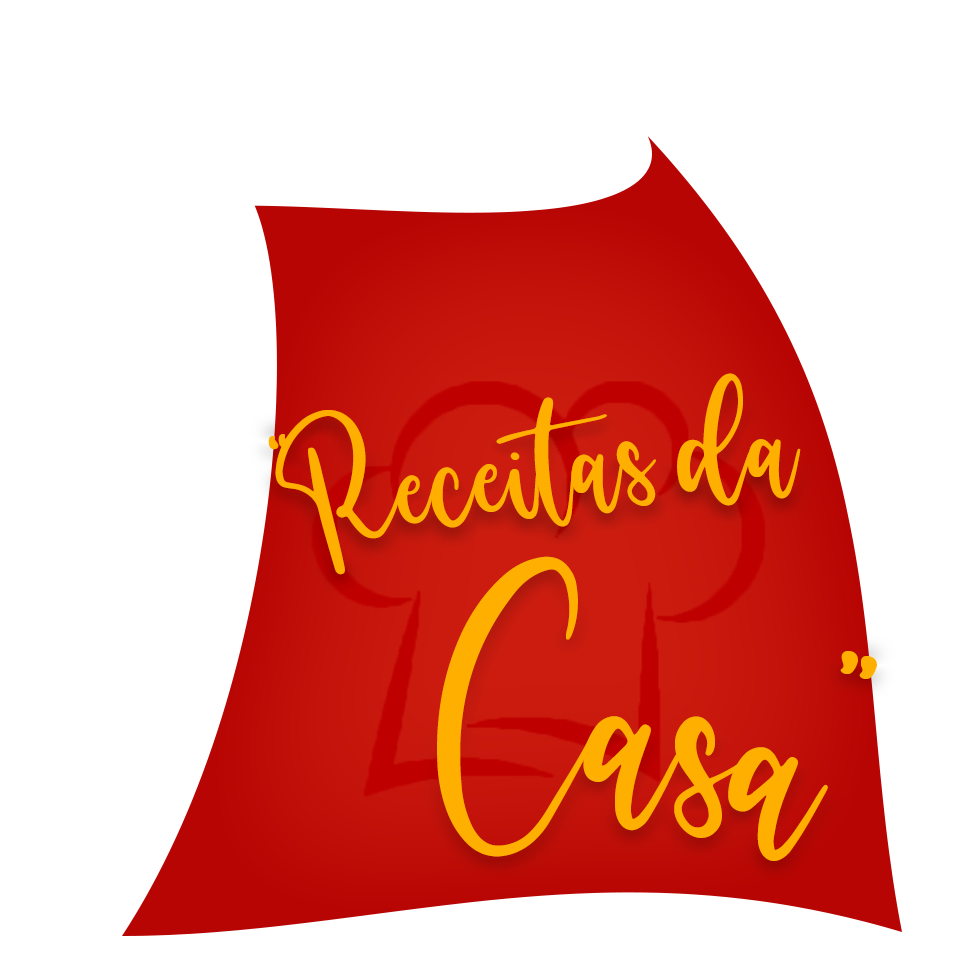
<style>
.page{position:relative;width:960px;height:960px;background:#ffffff}
.page>*{position:absolute;margin:0}
.t1{font:62.7px "bastian";color:#ffaf00;scale:1.05 1}
.t2{font:112.2px "bastian";color:#ffaf00;scale:1.05 1}
</style>
<div class="page">
<p class="t1" style="left:268px;top:373px;width:533px;height:202px;rotate:-7deg">“Receitas da</p>
<p class="t2" style="left:437px;top:556px;width:440px;height:305px;rotate:11deg">Casa”</p>
</div>
